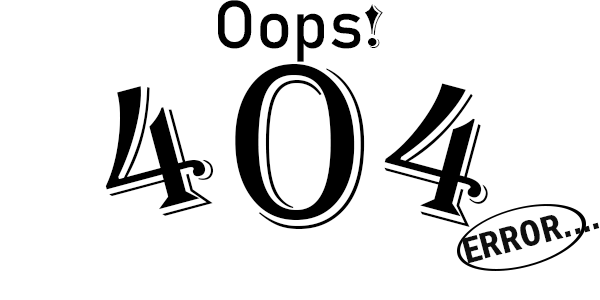
<style>
.page{position:relative;width:600px;height:300px;background:#ffffff}
.page>*{position:absolute;margin:0}
.t1{font:66.7px "Bahnschrift";color:#000000}
.t2{font:66.7px "Algerian";color:#000000}
.t3{font:241.5px "Algerian";color:#000000}
.t4{font:200px "Algerian";color:#000000}
</style>
<div class="page">
<p class="t1" style="left:218px;top:0px;width:165px;height:62px">Oops<span class="t2">!</span></p>
<p class="t3" style="left:235px;top:64px;width:130px;height:165px">0</p>
<p class="t4" style="left:105px;top:86px;width:109px;height:130px;rotate:-15deg">4</p>
<p class="t4" style="left:384px;top:83px;width:104px;height:144px;rotate:15deg">4</p>
</div>
